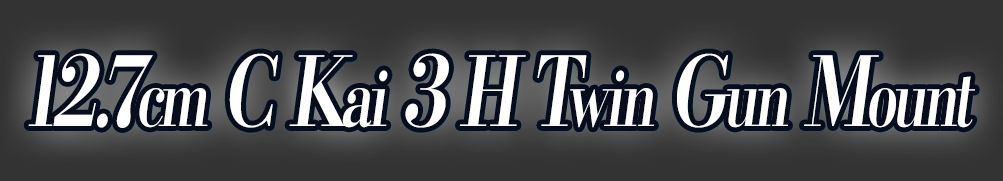
<style>
.page{position:relative;width:1003px;height:181px;background:#333333}
.page>*{position:absolute;margin:0}
.t1{font:96px "KochoStd-Heavy";letter-spacing:-0.08em;color:#ffffff;font-style:italic;scale:0.75 1}
.t2{font:76.8px "KochoStd-Heavy";letter-spacing:-0.08em;color:#ffffff;font-style:italic;scale:0.75 1}
</style>
<div class="page">
<p class="t1" style="left:28px;top:53px;width:947px;height:75px">12.7<span class="t2">cm </span>C K<span class="t2">ai</span> 3 H T<span class="t2">win</span> G<span class="t2">un</span> M<span class="t2">ount</span></p>
</div>
